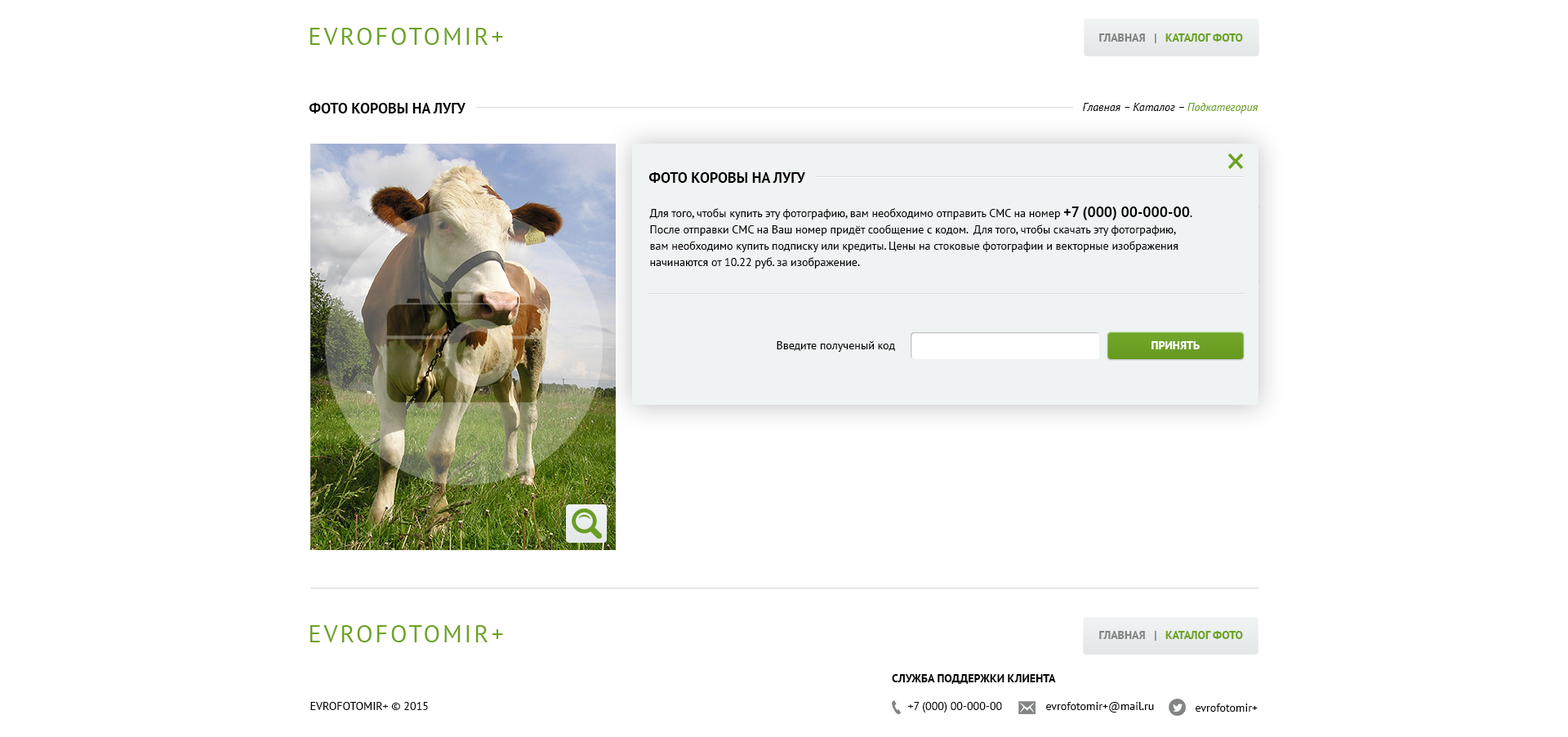
<style>
.page{position:relative;width:1568px;height:737px;background:#ffffff}
.page>*{position:absolute;margin:0}
.t1{font:14.7px "PTSans-Bold";color:#010100;text-transform:uppercase}
.t2{font:11.4px/16.3px "PTSans-Regular";color:#000000}
.t3{font:14.7px/16.3px "PTSans-Bold";color:#000000}
.t4{font:11.4px "PTSans-Regular";color:#000000}
.t5{font:11.4px "PTSans-Bold";color:#ffffff;text-transform:uppercase}
</style>
<div class="page">
<p class="t1" style="left:648px;top:172px;width:157px;height:11px">Фото Коровы на лугу</p>
<p class="t2" style="left:649px;top:207px;width:543px;height:62px">Для того, чтобы купить эту фотографию, вам необходимо отправить СМС на номер <span class="t3">+7 (000) 00-000-00</span>.<br>После отправки СМС на Ваш номер придёт сообщение с кодом.  Для того, чтобы скачать эту фотографию, <br>вам необходимо купить подписку или кредиты. Цены на стоковые фотографии и векторные изображения<br>начинаются от 10.22 руб. за изображение.</p>
<p class="t4" style="left:777px;top:341px;width:118px;height:11px">Введите полученый код</p>
<p class="t5" style="left:1152px;top:341px;width:48px;height:9px">Принять</p>
</div>
